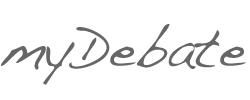
<style>
.page{position:relative;width:250px;height:100px;background:#ffffff}
.page>*{position:absolute;margin:0}
.t1{font:55px "Handwriting-Dakota";color:#666666}
</style>
<div class="page">
<p class="t1" style="left:1px;top:23px;width:246px;height:62px">myDebate</p>
</div>
